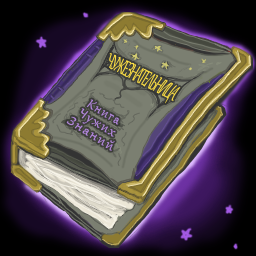
<style>
.page{position:relative;width:256px;height:256px}
.page>*{position:absolute;margin:0}
.t1{font:25px "Gabriola";letter-spacing:-0.1em;color:#ffe244;scale:0.56 1}
.t2{font:16.7px/12.5px "Gabriola";letter-spacing:0.1em;color:#b488de}
</style>
<div class="page">
<p class="t1" style="left:108px;top:53px;width:73px;height:51px;rotate:27deg">ЧУЖЕЗНАТЕЛЬНИЦА</p>
<p class="t2" style="left:66px;top:99px;width:53px;height:52px;text-align:center;rotate:32deg">Книга<br>Чужих<br>Знаний</p>
</div>
